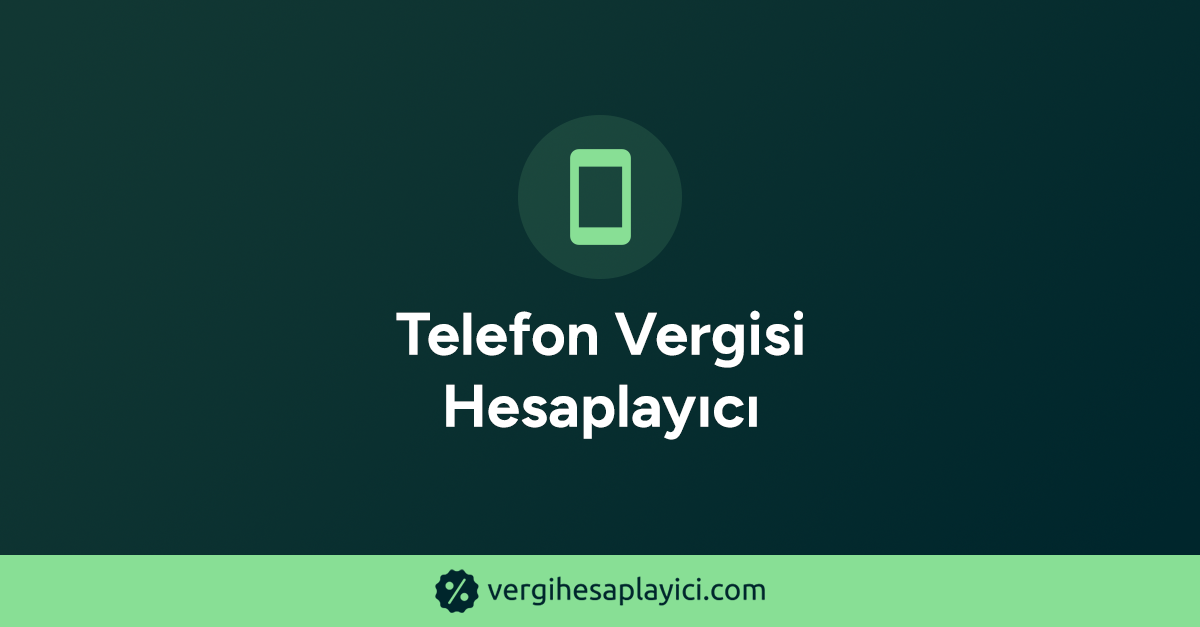
<style>
.page{position:relative;width:1200px;height:627px}
.page>*{position:absolute;margin:0}
.t1{font:60px "Figtree-Bold";color:#ffffff;font-weight:bold}
</style>
<div class="page">
<p class="t1" style="left:396px;top:310px;width:407px;height:130px;text-align:center">Telefon Vergisi<br>Hesaplayıcı</p>
</div>
